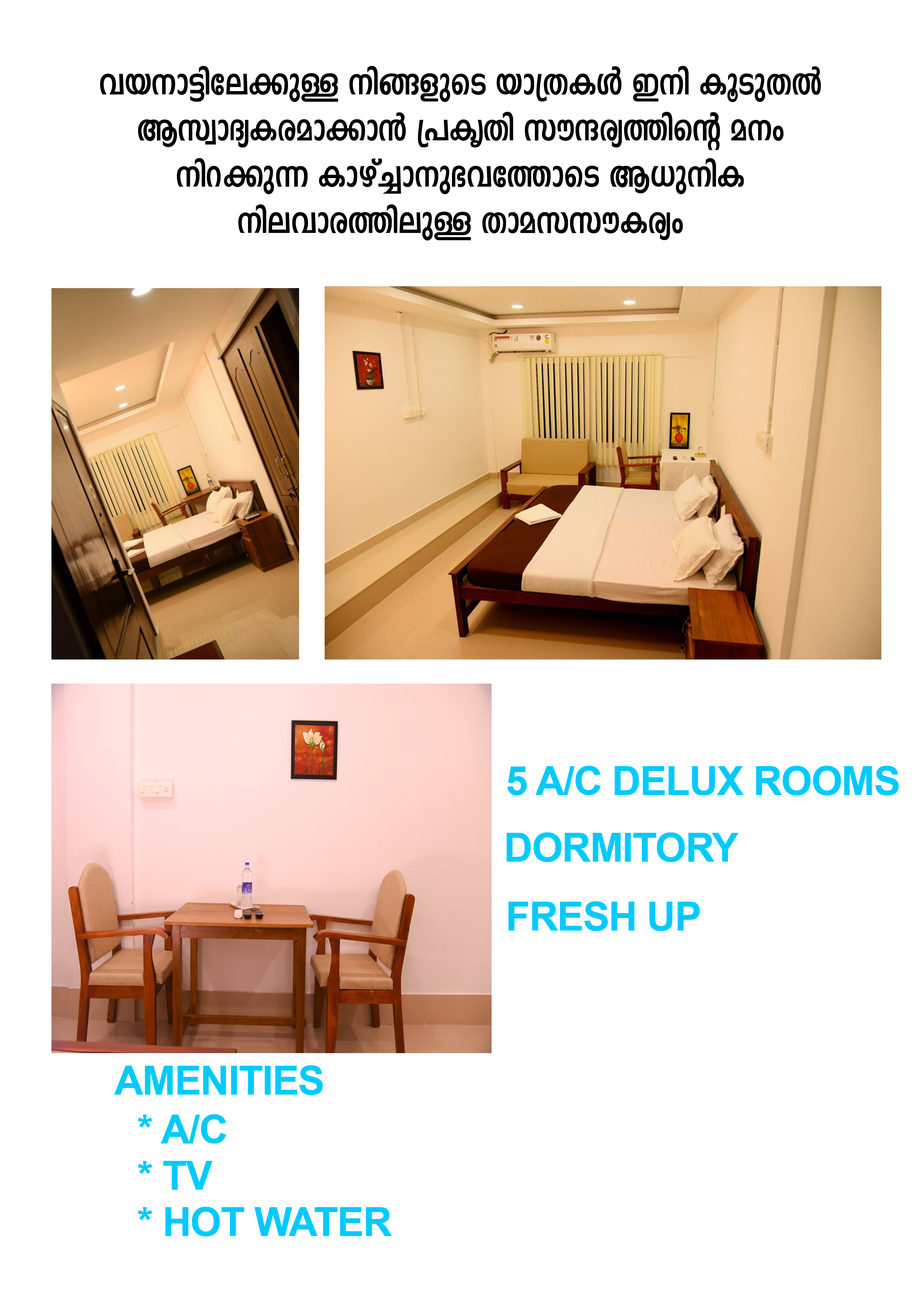
<style>
.page{position:relative;width:918px;height:1299px;background:#ffffff}
.page>*{position:absolute;margin:0}
.t1{font:42.9px/46.2px "FML-Indulekha-Bold";letter-spacing:-0.02em;color:#010101}
.t2{font:39.8px "Arial-BoldMT";letter-spacing:-0.02em;color:#00cafd}
.t3{font:39.8px/46.2px "Arial-BoldMT";letter-spacing:-0.02em;color:#00cafd}
</style>
<div class="page">
<p class="t1" style="left:100px;top:66px;width:721px;height:175px;text-align:center">hb\m«nte¡pÅ \n§fpsS bm{XIÄ C\n IqSpXÂ BkzmZyIcam¡m³ {]IrXn kuµcy¯nsâ a\w \nd¡p¶ Imgv¨m\p`ht¯msS B[p\nI \nehmc¯nepÅ XmakkuIcyw</p>
<p class="t2" style="left:507px;top:766px;width:392px;height:29px">5 A/C DELUX ROOMS</p>
<p class="t2" style="left:506px;top:832px;width:233px;height:30px">DORMITORY</p>
<p class="t2" style="left:508px;top:901px;width:192px;height:30px">FRESH UP</p>
<p class="t2" style="left:114px;top:1065px;width:209px;height:30px">AMENITIES</p>
<p class="t3" style="left:138px;top:1114px;width:254px;height:122px">* A/C<br>* TV<br>* HOT WATER</p>
</div>
